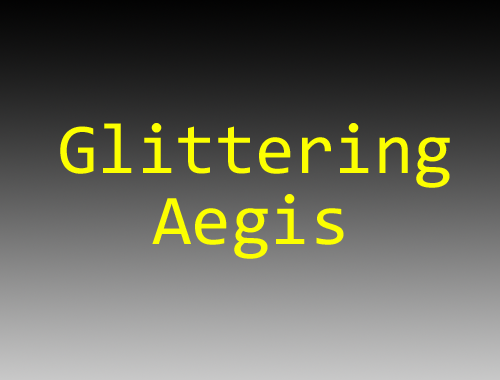
<style>
.page{position:relative;width:500px;height:380px}
.page>*{position:absolute;margin:0}
.t1{font:71.7px "Consolas";color:#fcff00}
</style>
<div class="page">
<p class="t1" style="left:60px;top:123px;width:390px;height:65px">Glittering</p>
<p class="t1" style="left:152px;top:194px;width:192px;height:65px">Aegis</p>
</div>
